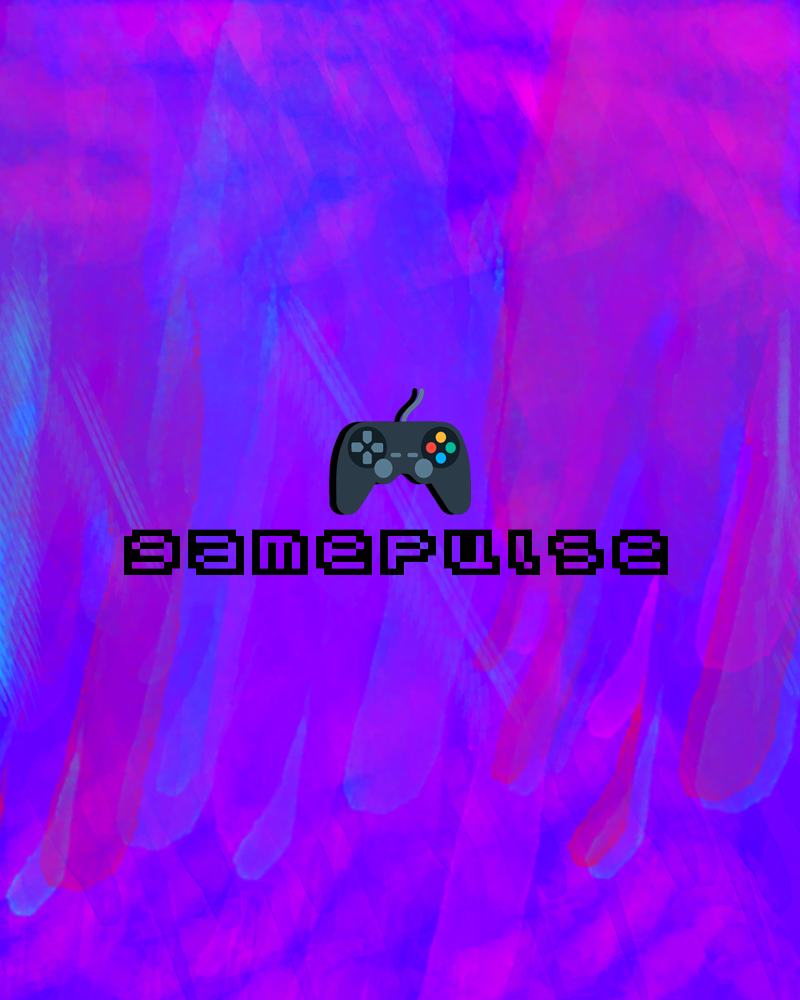
<style>
.page{position:relative;width:800px;height:1000px}
.page>*{position:absolute;margin:0}
.t1{font:45.5px "Hachicro-(Undertale-Battle-Font)";color:#000000;scale:1.23 1}
</style>
<div class="page">
<p class="t1" style="left:124px;top:529px;width:544px;height:46px">gamepulse</p>
</div>
